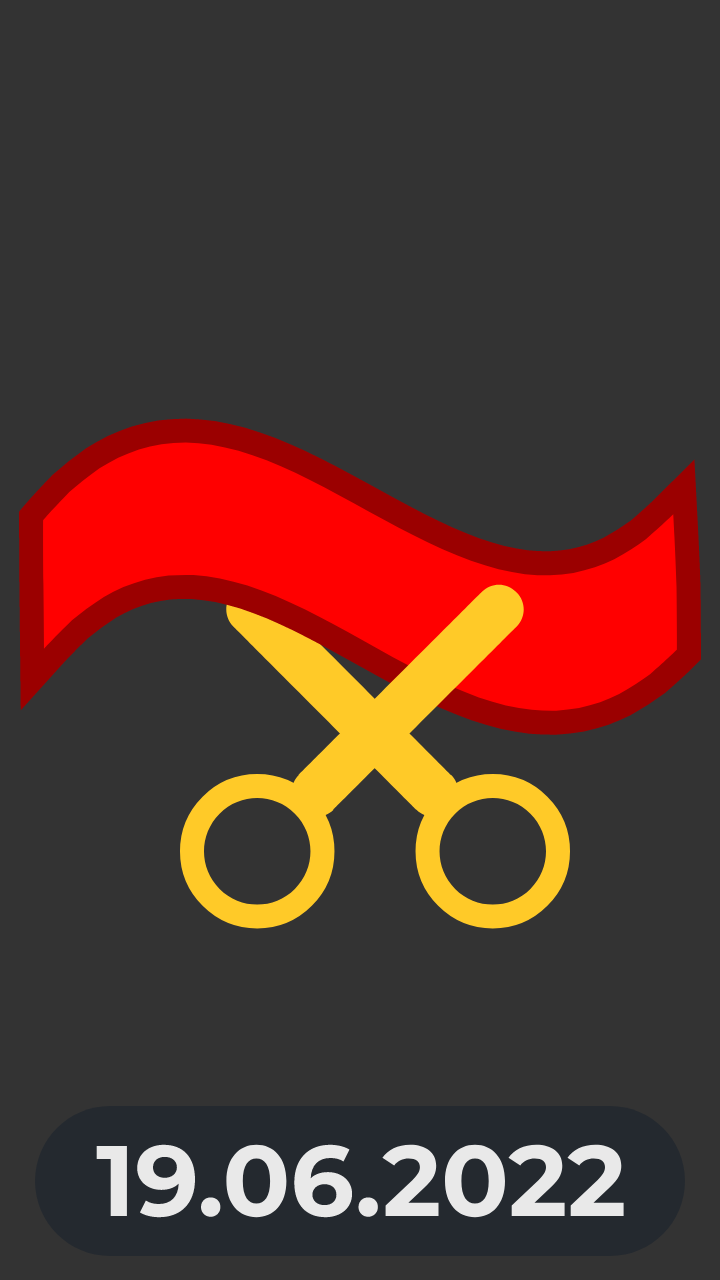
<style>
.page{position:relative;width:720px;height:1280px;background:#333333}
.page>*{position:absolute;margin:0}
.t1{font:100px "Montserrat-Bold";color:#e9e9e9}
</style>
<div class="page">
<p class="t1" style="left:96px;top:1144px;width:528px;height:74px">19.06.2022</p>
</div>
